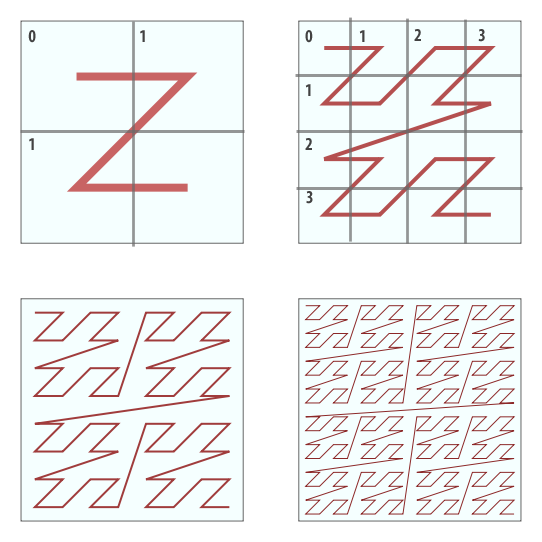
<style>
.page{position:relative;width:542px;height:542px;background:#f5ffff}
.page>*{position:absolute;margin:0}
.t1{font:18px "MyriadPro-BoldCond";color:#424242}
</style>
<div class="page">
<p class="t1" style="left:28px;top:30px;width:8px;height:13px">0</p>
<p class="t1" style="left:140px;top:30px;width:5px;height:12px">1</p>
<p class="t1" style="left:305px;top:30px;width:8px;height:13px">0</p>
<p class="t1" style="left:359px;top:30px;width:6px;height:12px">1</p>
<p class="t1" style="left:414px;top:29px;width:7px;height:12px">2</p>
<p class="t1" style="left:478px;top:29px;width:7px;height:13px">3</p>
<p class="t1" style="left:305px;top:84px;width:6px;height:12px">1</p>
<p class="t1" style="left:29px;top:138px;width:5px;height:12px">1</p>
<p class="t1" style="left:305px;top:138px;width:7px;height:12px">2</p>
<p class="t1" style="left:306px;top:191px;width:7px;height:13px">3</p>
</div>
